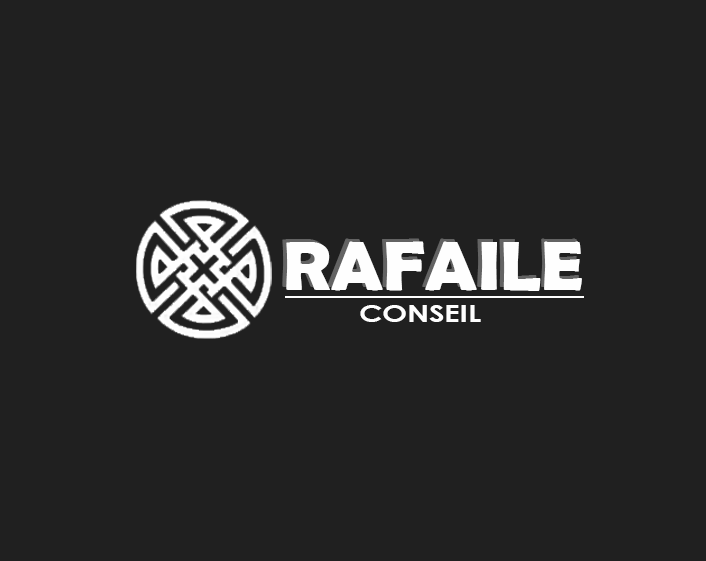
<style>
.page{position:relative;width:706px;height:561px;background:#202020}
.page>*{position:absolute;margin:0}
.t1{font:70.3px "BerlinSansFBDemi-Bold";color:#fefefe;scale:1.07 1}
.t2{font:23px "CenturyGothic-Bold";color:#fefefe;scale:1.29 1}
</style>
<div class="page">
<p class="t1" style="left:282px;top:238px;width:297px;height:50px">RAFAILE</p>
<p class="t1" style="left:286px;top:241px;width:296px;height:50px">RAFAILE</p>
<p class="t2" style="left:360px;top:305px;width:121px;height:17px">CONSEIL</p>
</div>
